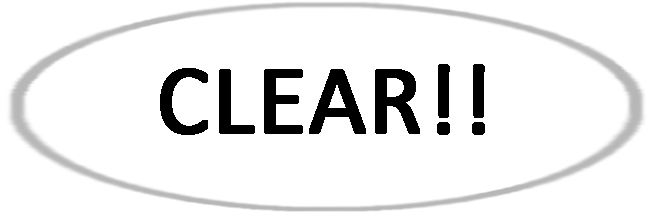
<style>
.page{position:relative;width:650px;height:213px;background:#ffffff}
.page>*{position:absolute;margin:0}
.t1{font:100px "Calibri";color:#000000;font-weight:bold}
</style>
<div class="page">
<p class="t1" style="left:160px;top:64px;width:325px;height:71px">CLEAR!!</p>
</div>
